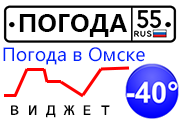
<style>
.page{position:relative;width:180px;height:120px;background:#ffffff}
.page>*{position:absolute;margin:0}
.t1{font:23.9px "MicrosoftYaHei-Bold";color:#000000}
.t2{font:18px "MicrosoftYaHei";color:#0024fc}
.t3{font:12.7px "KozGoPr6N-Bold";color:#010101}
</style>
<div class="page">
<p class="t1" style="left:19px;top:14px;width:108px;height:23px">ПОГОДА</p>
<p class="t2" style="left:3px;top:47px;width:142px;height:18px">Погода в Омске</p>
<p class="t3" style="left:11px;top:105px;width:99px;height:13px">В  И  Д  Ж  Е  Т</p>
</div>
